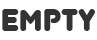
<style>
.page{position:relative;width:97px;height:40px;background:#ffffff}
.page>*{position:absolute;margin:0}
.t1{font:36px "Junegull";color:#333333}
</style>
<div class="page">
<p class="t1" style="left:2px;top:9px;width:93px;height:22px">EMPTY</p>
</div>
